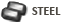
<style>
.page{position:relative;width:67px;height:22px;background:#ffffff}
.page>*{position:absolute;margin:0}
.t1{font:12px "Calibri-Bold";color:#4b4741}
</style>
<div class="page">
<p class="t1" style="left:32px;top:7px;width:29px;height:8px">STEEL</p>
</div>
